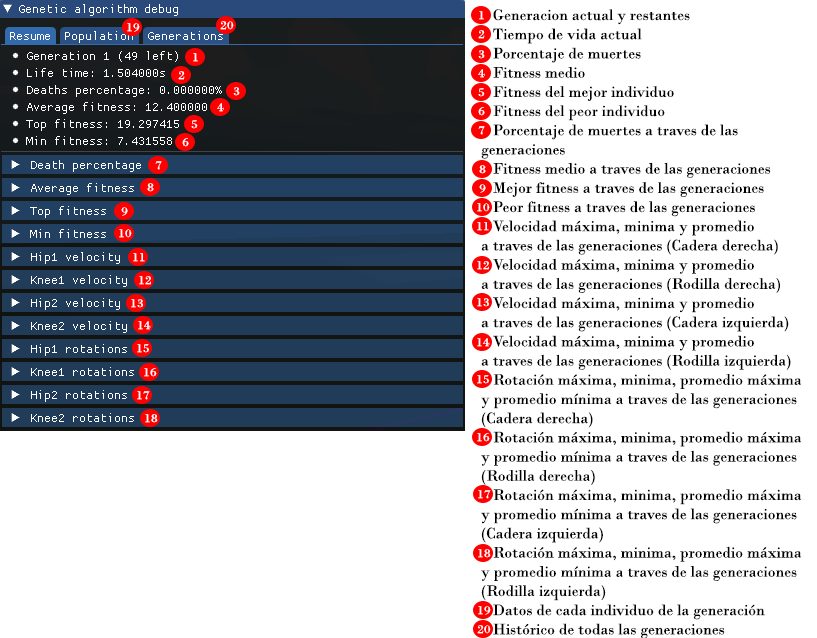
<style>
.page{position:relative;width:817px;height:638px;background:#ffffff}
.page>*{position:absolute;margin:0}
.t1{font:12px "BodoniMT";color:#ffffff;scale:1.15 1}
.t2{font:16px "BodoniMT";color:#000000}
</style>
<div class="page">
<p class="t1" style="left:479px;top:11px;width:5px;height:9px">1</p>
<p class="t2" style="left:481px;top:9px;width:321px;height:630px">Generacion actual y restantes<br>   Tiempo de vida actual<br>   Porcentaje de muertes<br>   Fitness medio<br>   Fitness del mejor individuo<br>   Fitness del peor individuo<br>   Porcentaje de muertes a traves de las <br>generaciones<br>   Fitness medio a traves de las generaciones<br>   Mejor fitness a traves de las generaciones<br>   Peor fitness a traves de las generaciones<br>   Velocidad máxima, minima y promedio<br>a traves de las generaciones (Cadera derecha)<br>   Velocidad máxima, minima y promedio<br>a traves de las generaciones (Rodilla derecha)<br>   Velocidad máxima, minima y promedio<br>a traves de las generaciones (Cadera izquierda)<br>   Velocidad máxima, minima y promedio<br>a traves de las generaciones (Rodilla izquierda)<br>   Rotación máxima, minima, promedio máxima<br>y promedio mínima a traves de las generaciones<br>(Cadera derecha)<br>   Rotación máxima, minima, promedio máxima<br>y promedio mínima a traves de las generaciones<br>(Rodilla derecha)<br>   Rotación máxima, minima, promedio máxima<br>y promedio mínima a traves de las generaciones<br>(Cadera izquierda)<br>   Rotación máxima, minima, promedio máxima<br>y promedio mínima a traves de las generaciones<br>(Rodilla izquierda)<br>   Datos de cada individuo de la generación<br>   Histórico de todas las generaciones</p>
<p class="t1" style="left:127px;top:23px;width:13px;height:9px">19</p>
<p class="t1" style="left:220px;top:21px;width:14px;height:9px">20</p>
<p class="t1" style="left:478px;top:30px;width:7px;height:9px">2</p>
<p class="t1" style="left:193px;top:53px;width:5px;height:9px">1</p>
<p class="t1" style="left:478px;top:50px;width:7px;height:9px">3</p>
<p class="t1" style="left:178px;top:71px;width:7px;height:9px">2</p>
<p class="t1" style="left:478px;top:69px;width:7px;height:9px">4</p>
<p class="t1" style="left:233px;top:87px;width:7px;height:9px">3</p>
<p class="t1" style="left:478px;top:88px;width:7px;height:9px">5</p>
<p class="t1" style="left:217px;top:103px;width:7px;height:9px">4</p>
<p class="t1" style="left:478px;top:107px;width:7px;height:9px">6</p>
<p class="t1" style="left:191px;top:120px;width:7px;height:9px">5</p>
<p class="t1" style="left:478px;top:126px;width:7px;height:9px">7</p>
<p class="t1" style="left:182px;top:138px;width:7px;height:9px">6</p>
<p class="t1" style="left:155px;top:161px;width:7px;height:9px">7</p>
<p class="t1" style="left:479px;top:165px;width:7px;height:9px">8</p>
<p class="t1" style="left:147px;top:183px;width:7px;height:9px">8</p>
<p class="t1" style="left:479px;top:184px;width:7px;height:9px">9</p>
<p class="t1" style="left:121px;top:207px;width:7px;height:9px">9</p>
<p class="t1" style="left:477px;top:203px;width:13px;height:9px">10</p>
<p class="t1" style="left:477px;top:222px;width:12px;height:9px">11</p>
<p class="t1" style="left:119px;top:229px;width:13px;height:9px">10</p>
<p class="t1" style="left:133px;top:253px;width:12px;height:9px">11</p>
<p class="t1" style="left:477px;top:261px;width:12px;height:9px">12</p>
<p class="t1" style="left:139px;top:276px;width:12px;height:9px">12</p>
<p class="t1" style="left:131px;top:299px;width:12px;height:9px">13</p>
<p class="t1" style="left:477px;top:298px;width:12px;height:9px">13</p>
<p class="t1" style="left:138px;top:321px;width:13px;height:9px">14</p>
<p class="t1" style="left:477px;top:338px;width:13px;height:9px">14</p>
<p class="t1" style="left:137px;top:344px;width:12px;height:9px">15</p>
<p class="t1" style="left:144px;top:368px;width:13px;height:9px">16</p>
<p class="t1" style="left:477px;top:375px;width:12px;height:9px">15</p>
<p class="t1" style="left:137px;top:391px;width:13px;height:9px">17</p>
<p class="t1" style="left:145px;top:414px;width:13px;height:9px">18</p>
<p class="t1" style="left:477px;top:433px;width:13px;height:9px">16</p>
<p class="t1" style="left:478px;top:490px;width:13px;height:9px">17</p>
<p class="t1" style="left:478px;top:549px;width:13px;height:9px">18</p>
<p class="t1" style="left:478px;top:606px;width:13px;height:9px">19</p>
<p class="t1" style="left:477px;top:625px;width:14px;height:9px">20</p>
</div>
